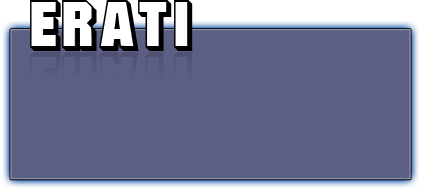
<style>
.page{position:relative;width:422px;height:191px;background:#5c5f84}
.page>*{position:absolute;margin:0}
.t1{font:72px "MisterBelvedere3D";color:#000000}
.t2{font:72px "MisterBelvedere3D";color:#585b7e}
</style>
<div class="page">
<p class="t1" style="left:30px;top:0px;width:163px;height:51px">ERATI</p>
<p class="t2" style="left:30px;top:52px;width:163px;height:51px">ERATI</p>
</div>
